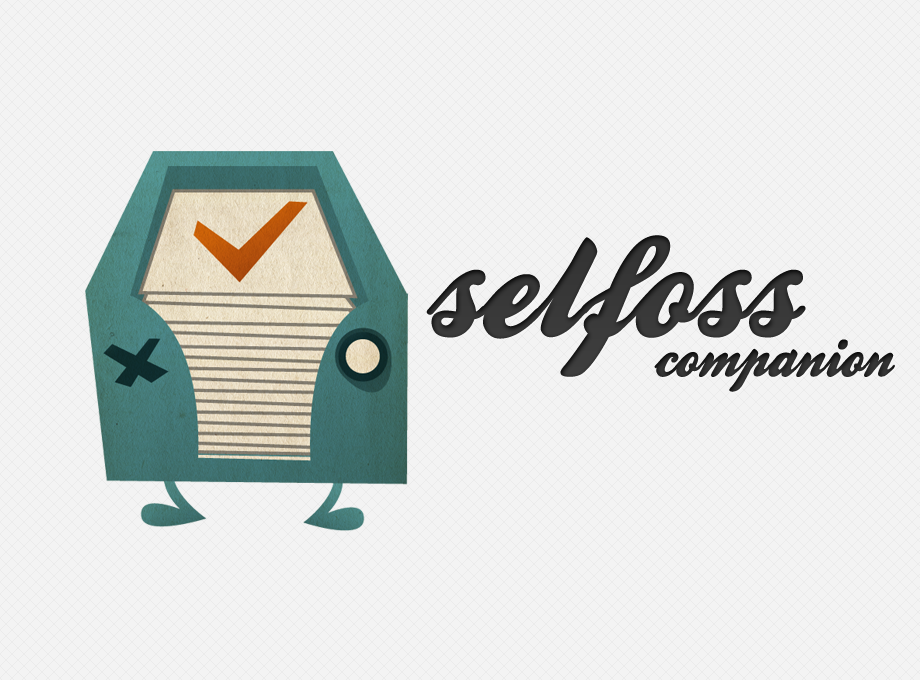
<style>
.page{position:relative;width:920px;height:680px;background:#f3f3f3}
.page>*{position:absolute;margin:0}
.t1{font:152.9px "BallparkWeiner";color:#343434}
.t2{font:57.7px "BallparkWeiner";color:#2b2b2b}
</style>
<div class="page">
<p class="t1" style="left:426px;top:235px;width:380px;height:142px">selfoss</p>
<p class="t2" style="left:654px;top:339px;width:241px;height:53px">companion</p>
</div>
